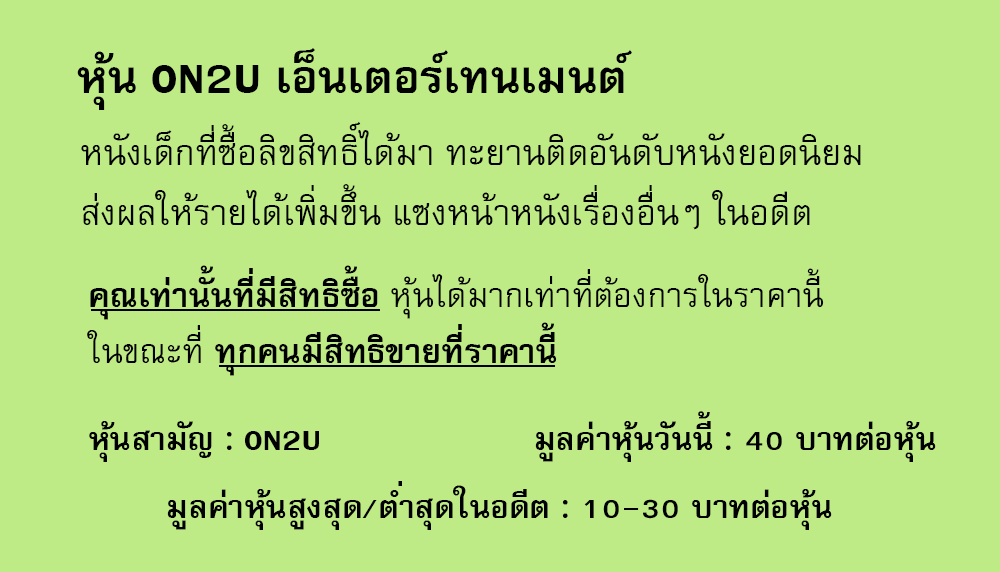
<style>
.page{position:relative;width:1000px;height:572px;background:#beeb85}
.page>*{position:absolute;margin:0}
.t1{font:64px "FreesiaUPCBold";color:#000000}
.t2{font:50px/60px "FreesiaUPC";color:#000000}
.t3{font:47px "FreesiaUPC";color:#000000}
.t4{font:47px "FreesiaUPCBold";color:#000000}
.t5{font:45px "FreesiaUPCBold";color:#000000}
</style>
<div class="page">
<p class="t1" style="left:77px;top:48px;width:555px;height:62px">หุ้น ON2U เอ็นเตอร์เทนเมนต์</p>
<p class="t2" style="left:81px;top:121px;width:780px;height:109px">หนังเด็กที่ซื้อลิขสิทธิ์ได้มา ทะยานติดอันดับหนังยอดนิยม<br>ส่งผลให้รายได้เพิ่มขึ้น แซงหน้าหนังเรื่องอื่นๆ ในอดีต</p>
<p class="t3" style="left:87px;top:265px;width:737px;height:111px"><span class="t4">คุณเท่านั้นที่มีสิทธิซื้อ </span>หุ้นได้มากเท่าที่ต้องการในราคานี้<br>ในขณะที่<span class="t4"> ทุกคนมีสิทธิขายที่ราคานี้</span></p>
<p class="t5" style="left:535px;top:411px;width:401px;height:51px">มูลค่าหุ้นวันนี้ : 40 บาทต่อหุ้น</p>
<p class="t5" style="left:89px;top:421px;width:230px;height:41px">หุ้นสามัญ : ON2U</p>
<p class="t5" style="left:167px;top:481px;width:665px;height:49px">มูลค่าหุ้นสูงสุด/ต่ำสุดในอดีต : 10-30 บาทต่อหุ้น</p>
</div>
